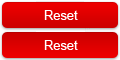
<style>
.page{position:relative;width:120px;height:60px}
.page>*{position:absolute;margin:0}
.t1{font:22px "ArialMT";color:#ffffff}
</style>
<div class="page">
<p class="t1" style="left:44px;top:10px;width:34px;height:10px">Reset</p>
<p class="t1" style="left:44px;top:40px;width:34px;height:10px">Reset</p>
</div>
